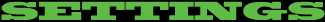
<style>
.page{position:relative;width:325px;height:22px;background:#5fbb46}
.page>*{position:absolute;margin:0}
.t1{font:24px "BlackoakStd";color:#5fbb46}
</style>
<div class="page">
<p class="t1" style="left:1px;top:1px;width:324px;height:19px">SETTINGS</p>
</div>
